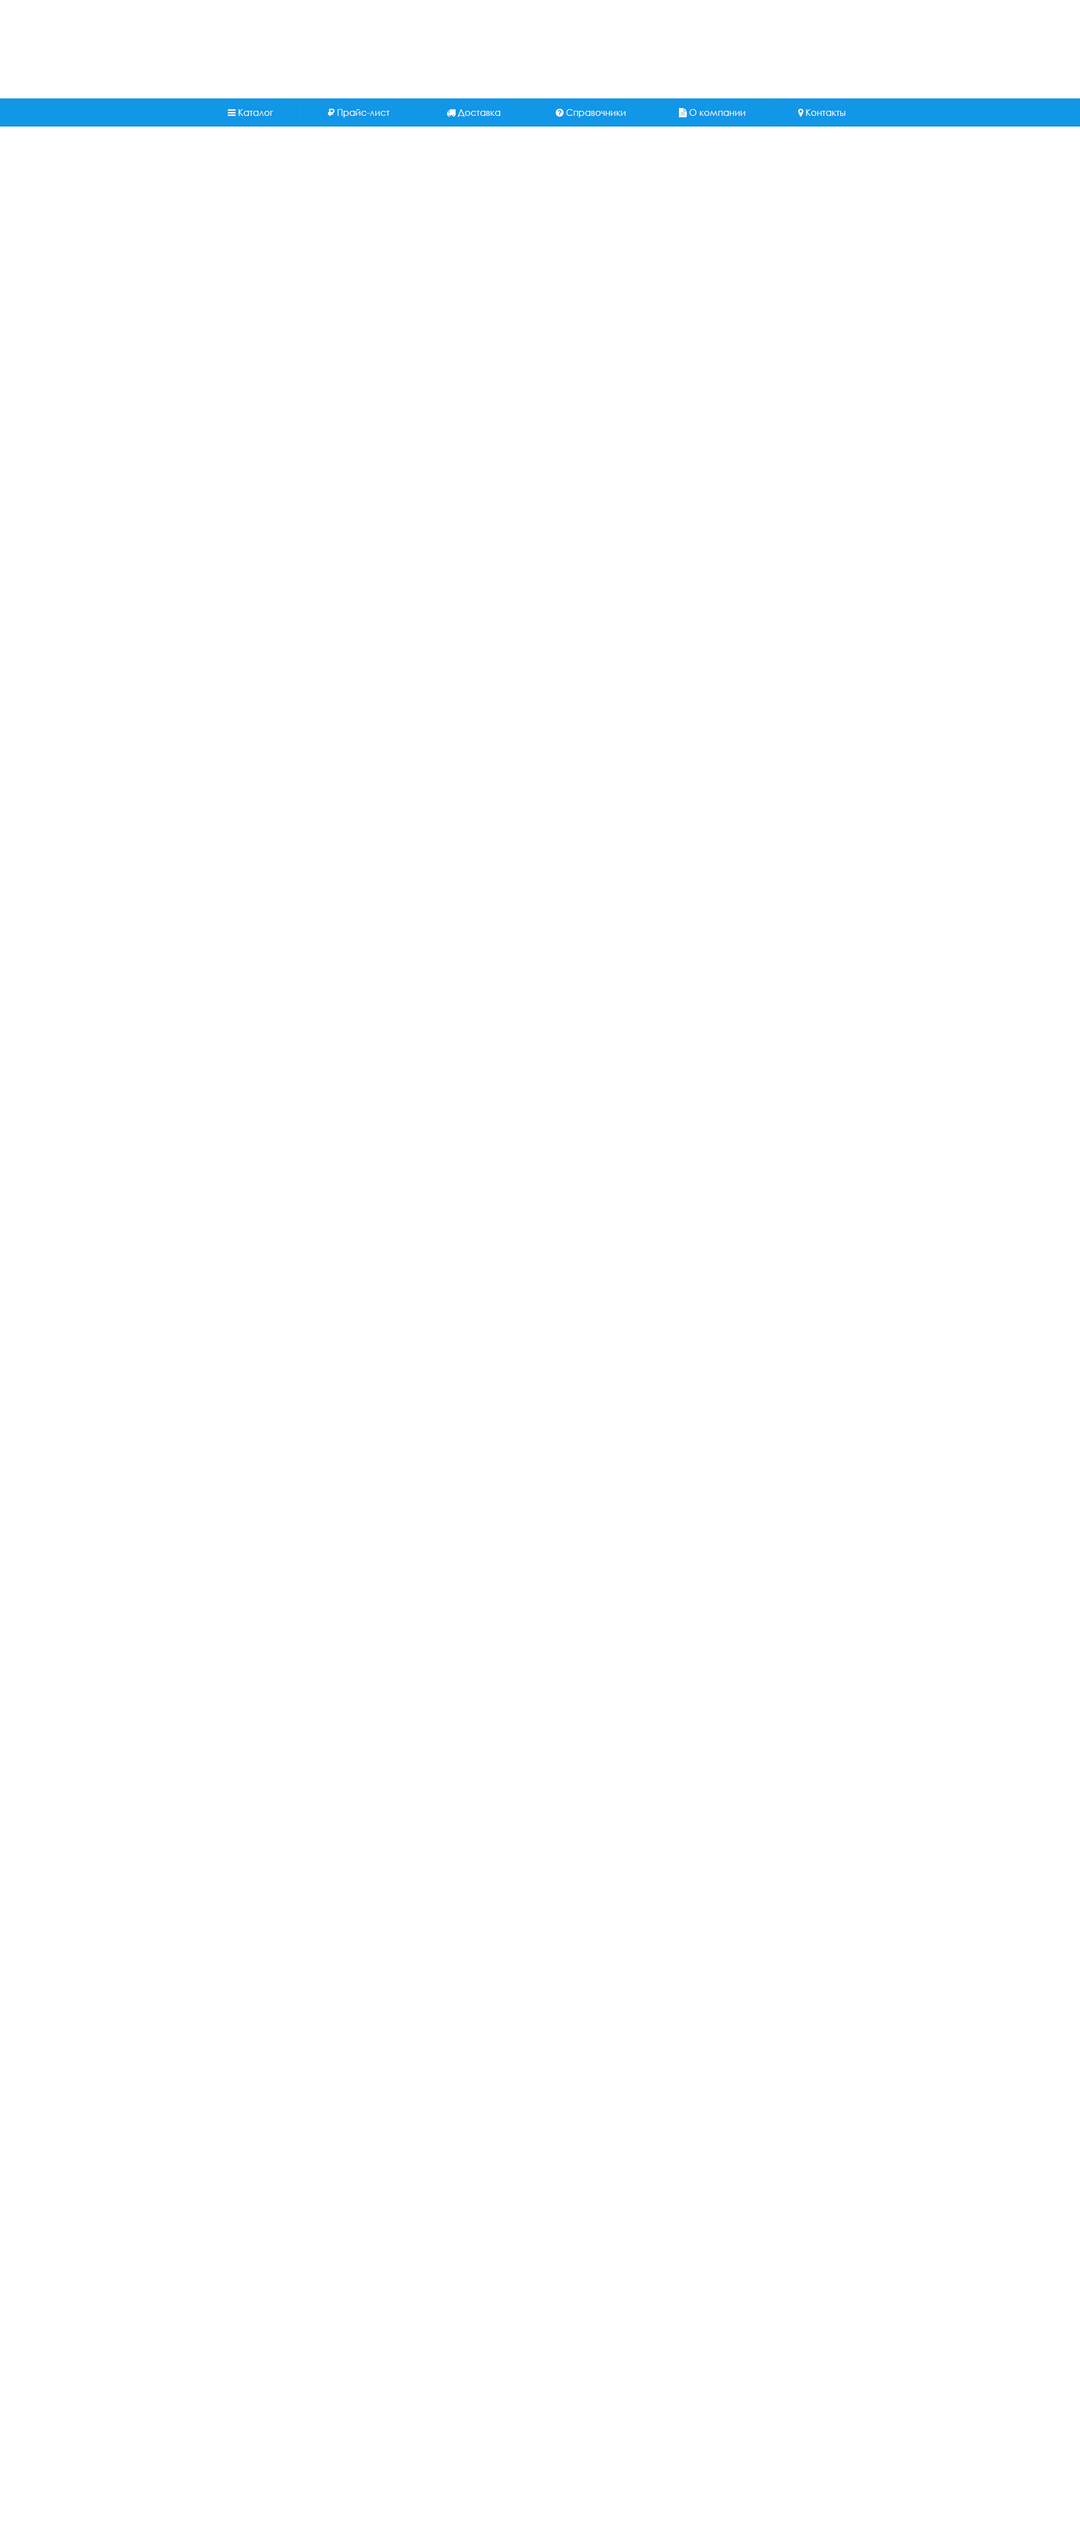
<style>
.page{position:relative;width:1080px;height:2522px;background:#ffffff}
.page>*{position:absolute;margin:0}
.t1{font:9px "CenturyGothic";color:#ffffff}
</style>
<div class="page">
<p class="t1" style="left:238px;top:109px;width:35px;height:7px">Каталог</p>
<p class="t1" style="left:338px;top:109px;width:52px;height:9px">Прайс-лист</p>
<p class="t1" style="left:458px;top:109px;width:43px;height:8px">Доставка</p>
<p class="t1" style="left:566px;top:109px;width:60px;height:9px">Справочники</p>
<p class="t1" style="left:689px;top:109px;width:56px;height:7px">О компании</p>
<p class="t1" style="left:806px;top:109px;width:39px;height:7px">Контакты</p>
</div>
